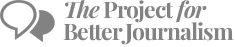
<style>
.page{position:relative;width:235px;height:47px;background:#ffffff}
.page>*{position:absolute;margin:0}
.t1{font:22.8px/22.3px "PlayfairDisplay-Bold";letter-spacing:-0.04em;color:#828282}
.t2{font:22.8px/22.3px "PlayfairDisplay-BoldItalic";letter-spacing:-0.04em;color:#828282}
</style>
<div class="page">
<p class="t1" style="left:63px;top:0px;width:171px;height:45px"><span class="t2">The </span>Project<span class="t2"> for<br></span>Better Journalism</p>
</div>
